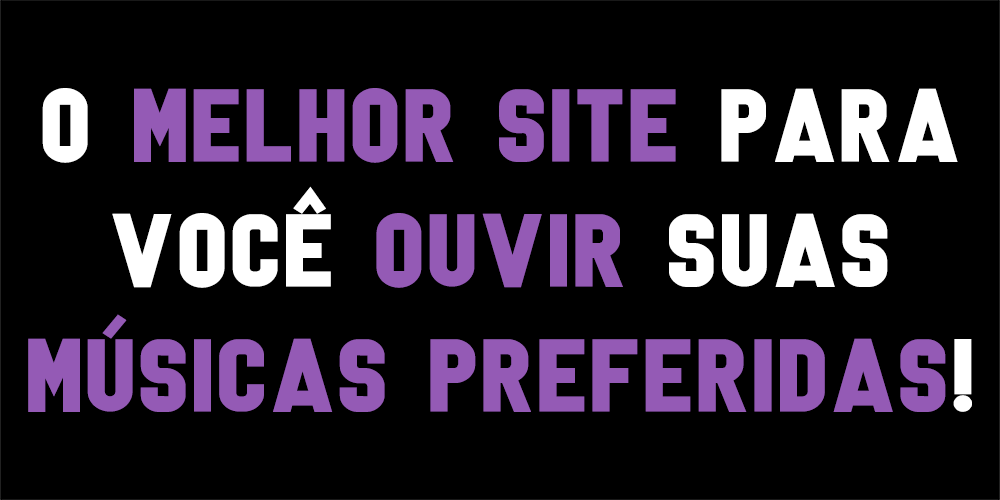
<style>
.page{position:relative;width:1000px;height:500px;background:#000000}
.page>*{position:absolute;margin:0}
.t1{font:104.2px "LanterosySansSerif";letter-spacing:0.025em;color:#945ab5;scale:1.12 1}
.t2{font:104.2px "LanterosySansSerif";letter-spacing:0.025em;color:#ffffff;scale:1.12 1}
</style>
<div class="page">
<p class="t1" style="left:28px;top:88px;width:944px;height:324px;text-align:center"><span class="t2">O</span> MELHOR SITE <span class="t2">PARA<br>VOCÊ</span> OUVIR <span class="t2">SUAS<br></span>MÚSICAS PREFERIDAS<span class="t2">!</span></p>
</div>
